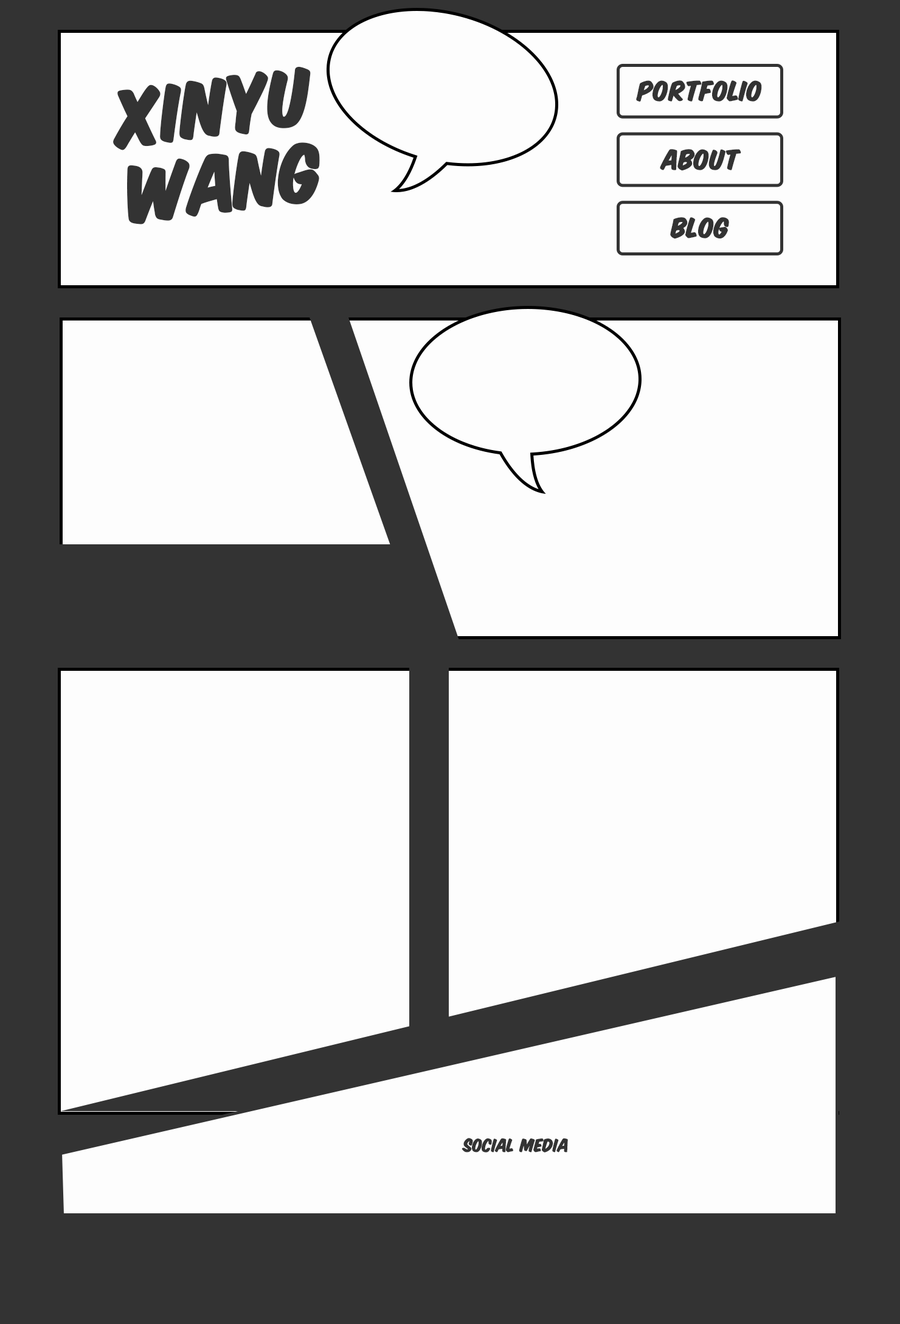
<style>
.page{position:relative;width:900px;height:1324px;background:#fdfdfd}
.page>*{position:absolute;margin:0}
.t1{font:63.7px "KomikaTitle-Paint";color:#333333}
.t2{font:22.2px "KomikaTitle-Paint";color:#333333}
.t3{font:14.6px "KomikaTitle-Paint";color:#333333}
</style>
<div class="page">
<p class="t1" style="left:113px;top:66px;width:207px;height:158px;rotate:-7deg">xinyu<br>wang</p>
<p class="t2" style="left:636px;top:80px;width:126px;height:22px">portfolio</p>
<p class="t2" style="left:660px;top:149px;width:82px;height:22px">about</p>
<p class="t2" style="left:670px;top:217px;width:59px;height:22px">blog</p>
<p class="t3" style="left:462px;top:1138px;width:106px;height:15px">social media</p>
</div>
